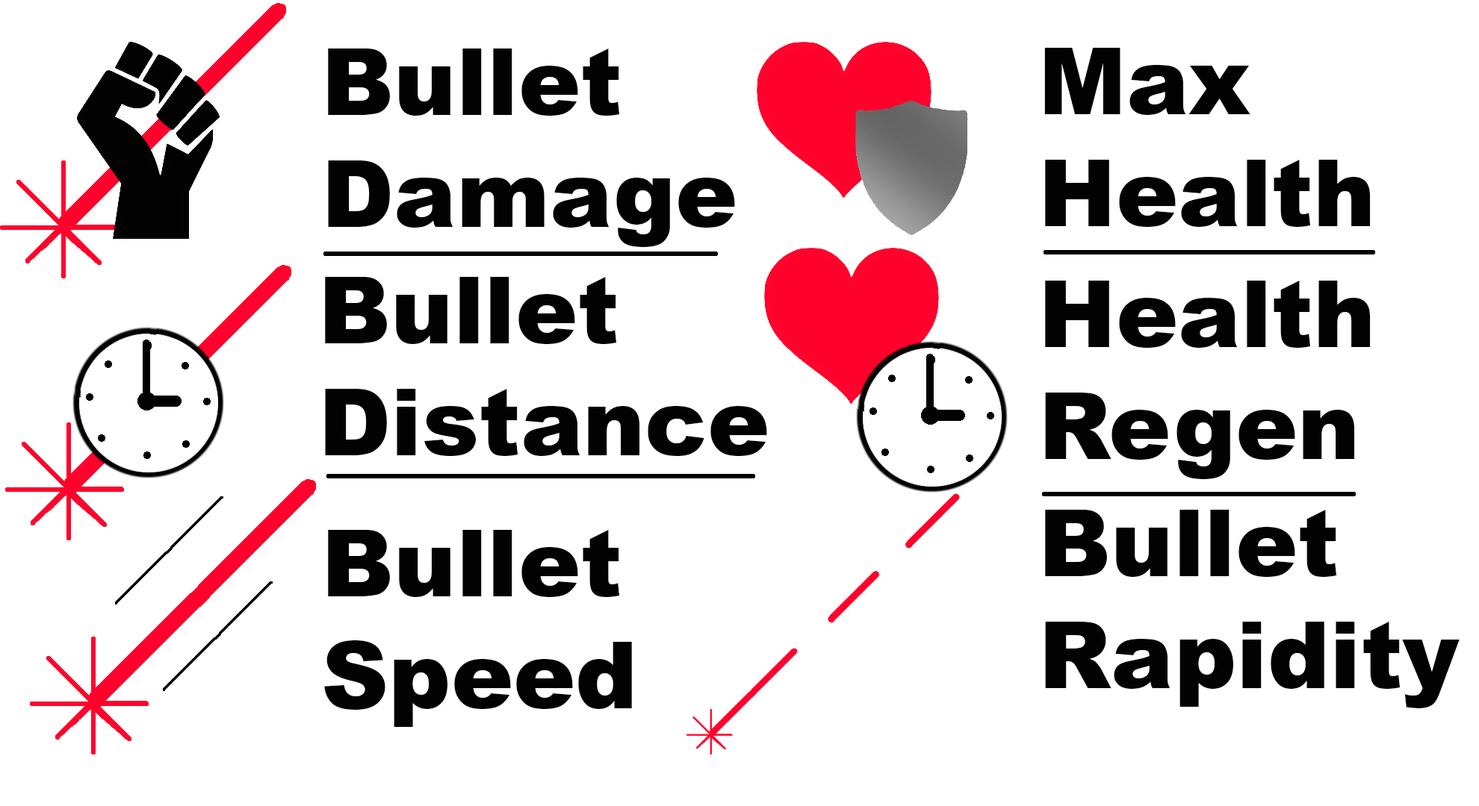
<style>
.page{position:relative;width:1479px;height:806px;background:#ffffff}
.page>*{position:absolute;margin:0}
.t1{font:93.3px "Arial-Black";color:#020202}
</style>
<div class="page">
<p class="t1" style="left:328px;top:49px;width:407px;height:198px">Bullet<br>Damage</p>
<p class="t1" style="left:1044px;top:48px;width:326px;height:179px">Max<br>Health</p>
<p class="t1" style="left:325px;top:277px;width:442px;height:179px">Bullet <br>Distance</p>
<p class="t1" style="left:1045px;top:281px;width:325px;height:198px">Health<br>Regen</p>
<p class="t1" style="left:1045px;top:510px;width:414px;height:199px">Bullet<br>Rapidity</p>
<p class="t1" style="left:324px;top:530px;width:308px;height:197px">Bullet<br>Speed</p>
</div>
